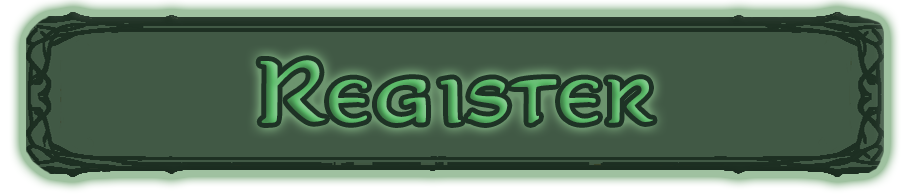
<style>
.page{position:relative;width:906px;height:195px;background:#415945}
.page>*{position:absolute;margin:0}
.t1{font:86.4px "MiddleEarth";color:#5bba69}
</style>
<div class="page">
<p class="t1" style="left:260px;top:60px;width:393px;height:63px">Register</p>
</div>
